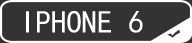
<style>
.page{position:relative;width:192px;height:43px;background:#333333}
.page>*{position:absolute;margin:0}
.t1{font:31.8px "SimHei";color:#ffffff;scale:0.97 1}
</style>
<div class="page">
<p class="t1" style="left:26px;top:11px;width:117px;height:22px">IPHONE 6</p>
</div>
